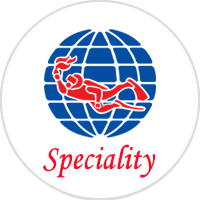
<style>
.page{position:relative;width:200px;height:200px;background:#ffffff}
.page>*{position:absolute;margin:0}
.t1{font:34.5px "MonotypeCorsiva";color:#f60d28;font-weight:bold;scale:0.87 1}
</style>
<div class="page">
<p class="t1" style="left:43px;top:144px;width:113px;height:34px">Speciality</p>
</div>
